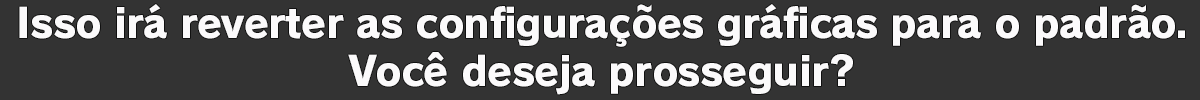
<style>
.page{position:relative;width:1200px;height:100px;background:#333333}
.page>*{position:absolute;margin:0}
.t1{font:40px "RodinPro-EB";letter-spacing:-0.018em;color:#fbfafb}
.t2{font:40px "RodinPro-EB";letter-spacing:-0.015em;color:#fbfafb}
</style>
<div class="page">
<p class="t1" style="left:19px;top:4px;width:1166px;height:43px">Isso irá reverter as configurações gráficas para o padrão.</p>
<p class="t2" style="left:348px;top:52px;width:505px;height:43px">Você deseja prosseguir?</p>
</div>
